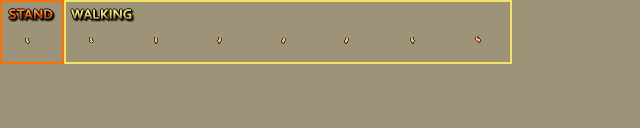
<style>
.page{position:relative;width:640px;height:128px;background:#9d9378}
.page>*{position:absolute;margin:0}
.t1{font:14px "Corbel-Bold"}
</style>
<div class="page">
<p class="t1" style="left:9px;top:9px;width:44px;height:10px">STAND</p>
<p class="t1" style="left:71px;top:9px;width:61px;height:10px">WALKING</p>
</div>
